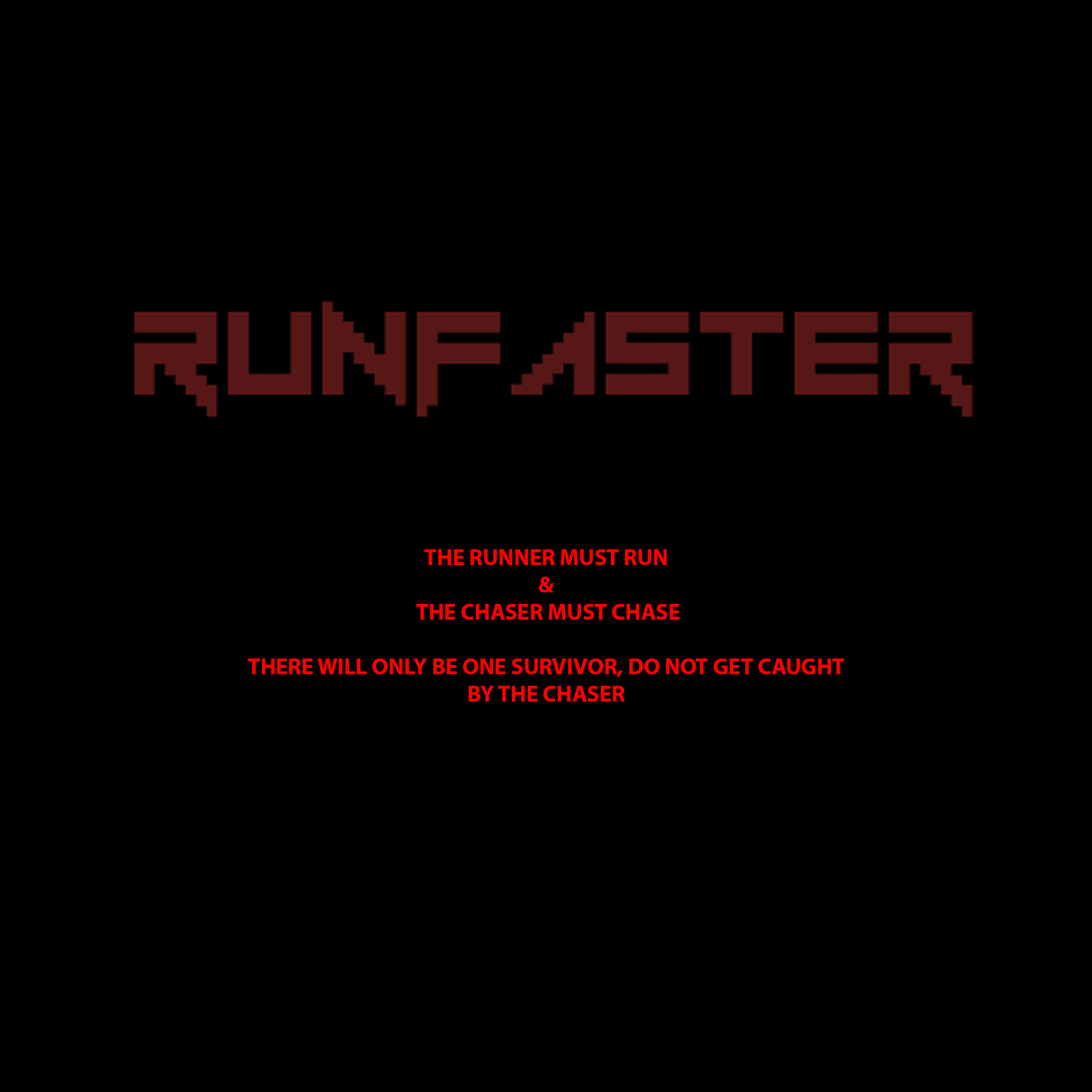
<style>
.page{position:relative;width:1092px;height:1092px;background:#000000}
.page>*{position:absolute;margin:0}
.t1{font:22.7px "MyriadPro-Bold";color:#ff0000}
</style>
<div class="page">
<p class="t1" style="left:248px;top:549px;width:596px;height:153px;text-align:center">THE RUNNER MUST RUN <br>&amp;<br> THE CHASER MUST CHASE<br><br>THERE WILL ONLY BE ONE SURVIVOR, DO NOT GET CAUGHT BY THE CHASER</p>
</div>
